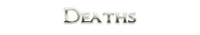
<style>
.page{position:relative;width:200px;height:35px;background:#ffffff}
.page>*{position:absolute;margin:0}
.t1{font:18px "Bronzetti-SmallCapitals"}
</style>
<div class="page">
<p class="t1" style="left:63px;top:7px;width:73px;height:16px">Deaths</p>
</div>
